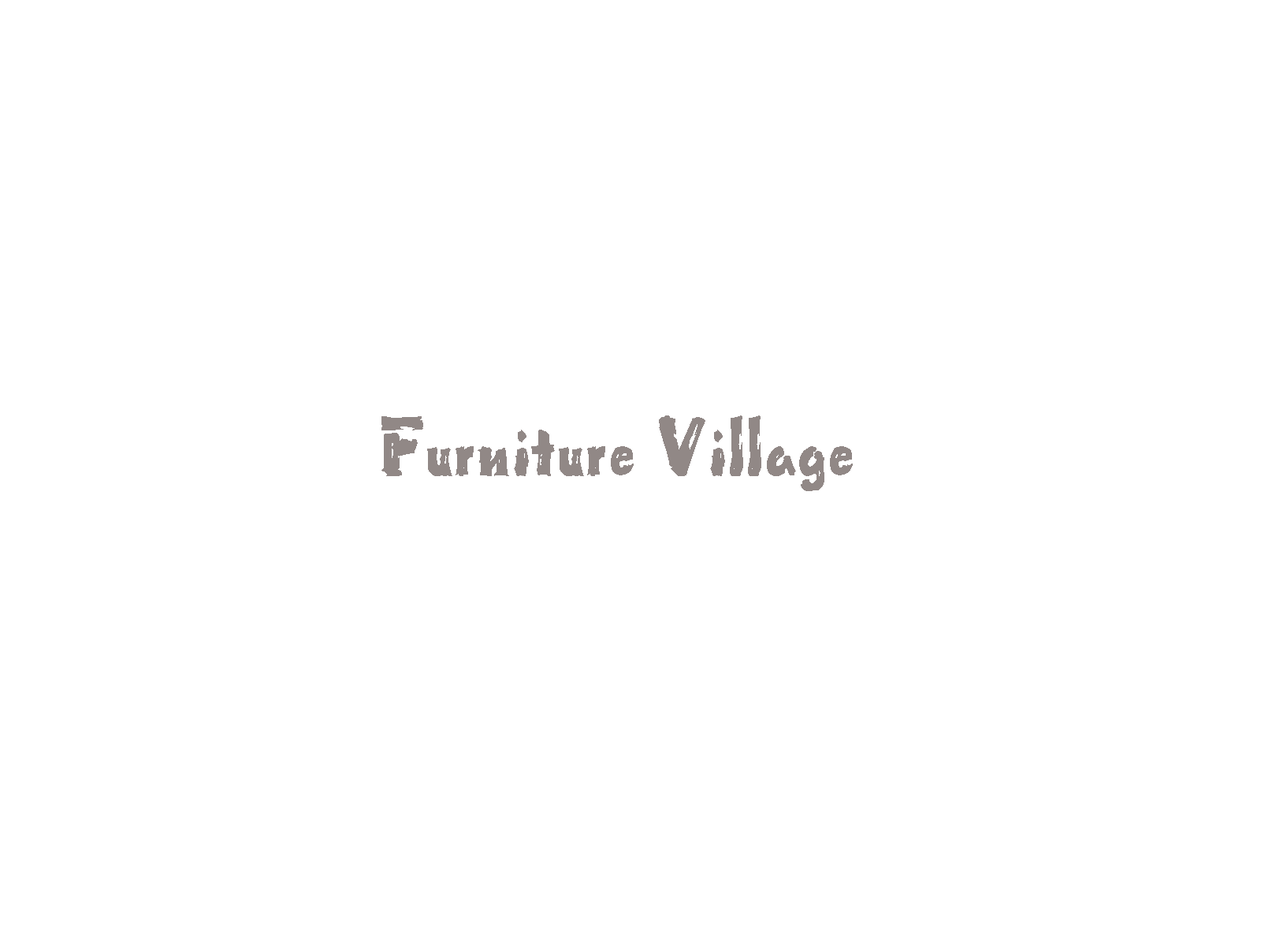
<style>
.page{position:relative;width:1261px;height:946px;background:#ffffff}
.page>*{position:absolute;margin:0}
.t1{font:96.9px "Tumbleweed";color:#918886}
</style>
<div class="page">
<p class="t1" style="left:381px;top:415px;width:472px;height:76px">Furniture Village</p>
</div>
